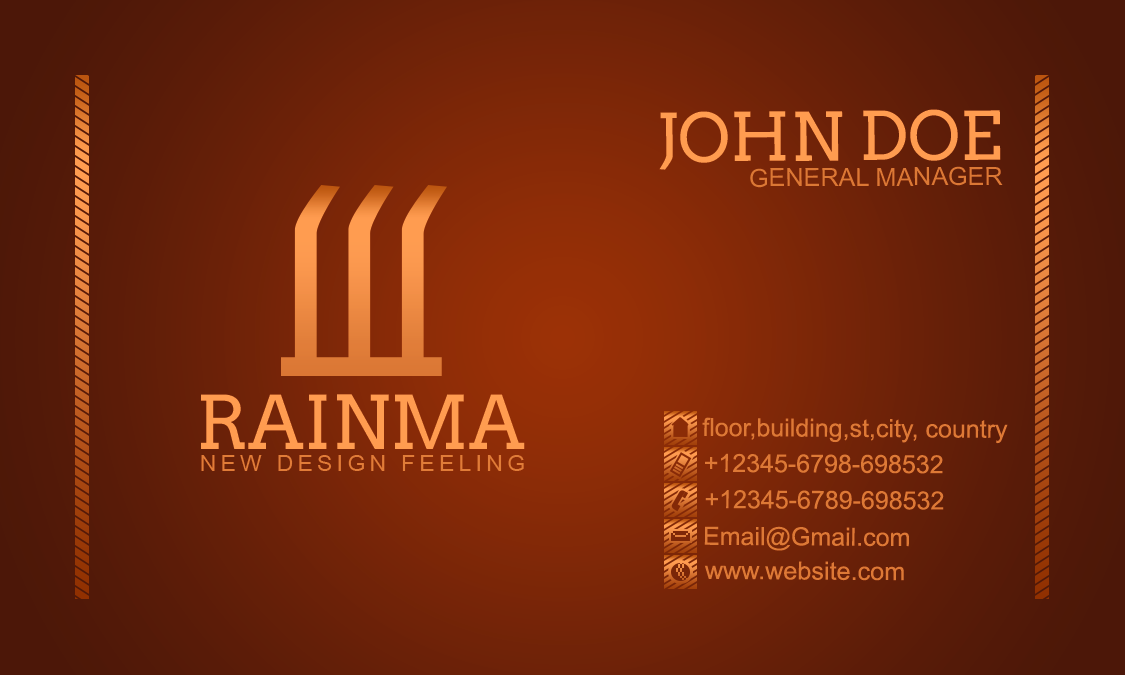
<style>
.page{position:relative;width:1125px;height:675px}
.page>*{position:absolute;margin:0}
.t1{font:66.7px "Arvo";color:#ff9c50}
.t2{font:25px "ArialMT";color:#db7835}
.t3{font:73.6px "Arvo";color:#ff9c50}
.t4{font:25px "ArialMT";color:#dd7936}
.t5{font:22.4px "ArialMT";letter-spacing:0.2em;color:#e07c38}
</style>
<div class="page">
<p class="t1" style="left:659px;top:109px;width:342px;height:61px">JOHN DOE</p>
<p class="t2" style="left:750px;top:166px;width:253px;height:22px">GENERAL MANAGER</p>
<p class="t3" style="left:201px;top:394px;width:324px;height:55px">RAINMA</p>
<p class="t4" style="left:702px;top:417px;width:306px;height:27px">floor,building,st,city, country</p>
<p class="t5" style="left:201px;top:455px;width:323px;height:16px">NEW DESIGN FEELING</p>
<p class="t4" style="left:705px;top:453px;width:238px;height:21px">+12345-6798-698532</p>
<p class="t4" style="left:705px;top:490px;width:239px;height:20px">+12345-6789-698532</p>
<p class="t4" style="left:704px;top:526px;width:205px;height:25px">Email@Gmail.com</p>
<p class="t4" style="left:704px;top:561px;width:200px;height:20px">www.website.com</p>
</div>
